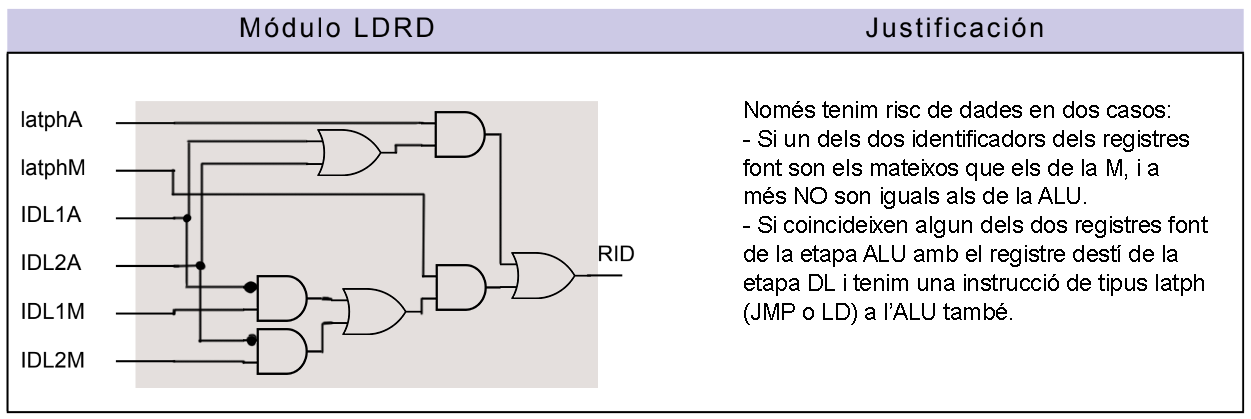
<style>
.page{position:relative;width:1251px;height:419px;background:#ffffff}
.page>*{position:absolute;margin:0}
.t1{font:24px "ArialMT";letter-spacing:-0.02em;color:#000000}
</style>
<div class="page">
<p class="t1" style="left:743px;top:101px;width:465px;height:224px">Només tenim risc de dades en dos casos:<br>- Si un dels dos identificadors dels registres<br>font son els mateixos que els de la M, i a<br>més NO son iguals als de la ALU.<br>- Si coincideixen algun dels dos registres font<br>de la etapa ALU amb el registre destí de la<br>etapa DL i tenim una instrucció de tipus latph<br>(JMP o LD) a l’ALU també.</p>
</div>
